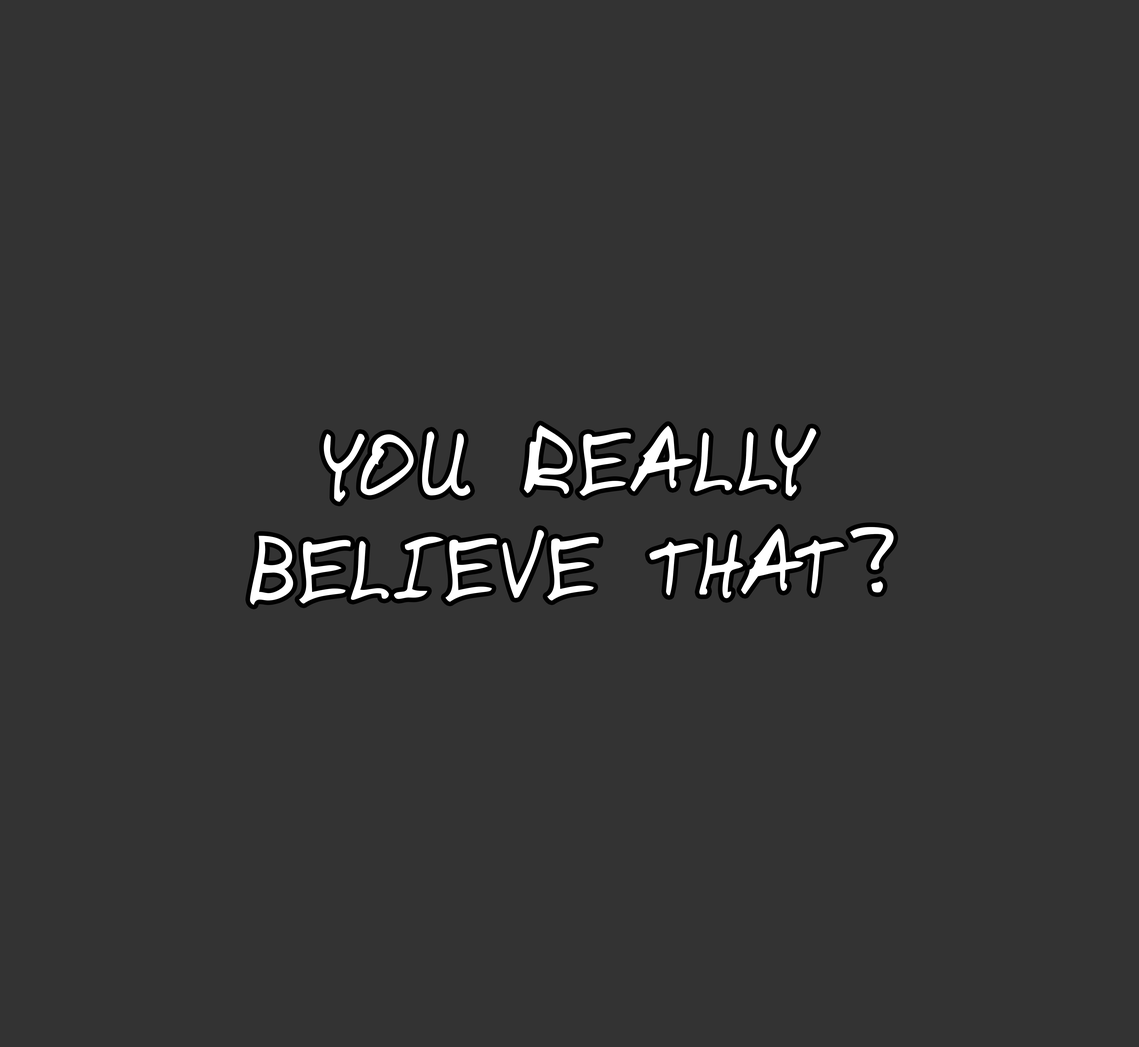
<style>
.page{position:relative;width:1139px;height:1047px;background:#333333}
.page>*{position:absolute;margin:0}
.t1{font:86.9px "DomesticManners";letter-spacing:0.04em;color:#ffffff}
</style>
<div class="page">
<p class="t1" style="left:250px;top:425px;width:643px;height:180px;text-align:center;rotate:-1deg">YOU REALLY<br>BELIEVE THAT?</p>
</div>
